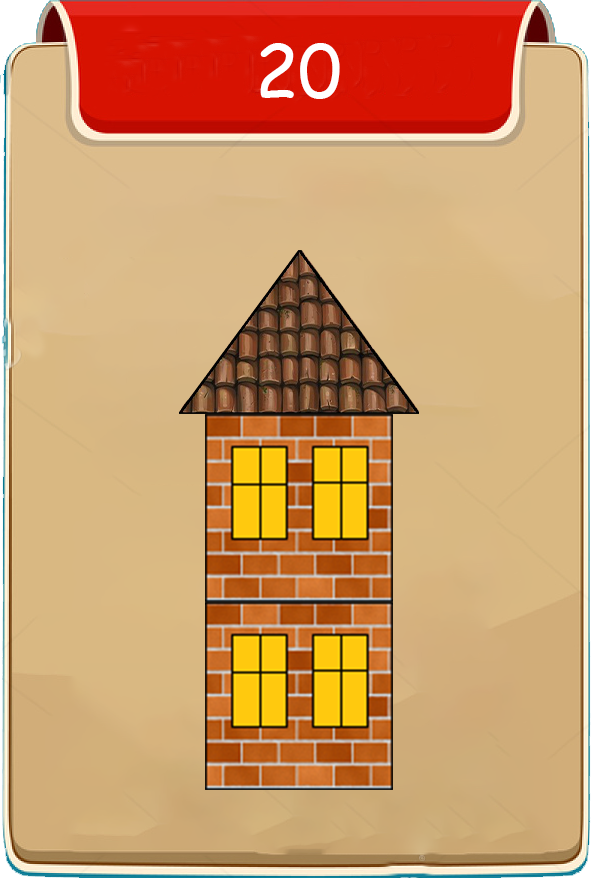
<style>
.page{position:relative;width:591px;height:878px}
.page>*{position:absolute;margin:0}
.t1{font:72px "ComicSansMS";letter-spacing:-0.02em;color:#ffffff}
</style>
<div class="page">
<p class="t1" style="left:260px;top:43px;width:80px;height:56px">20</p>
</div>
